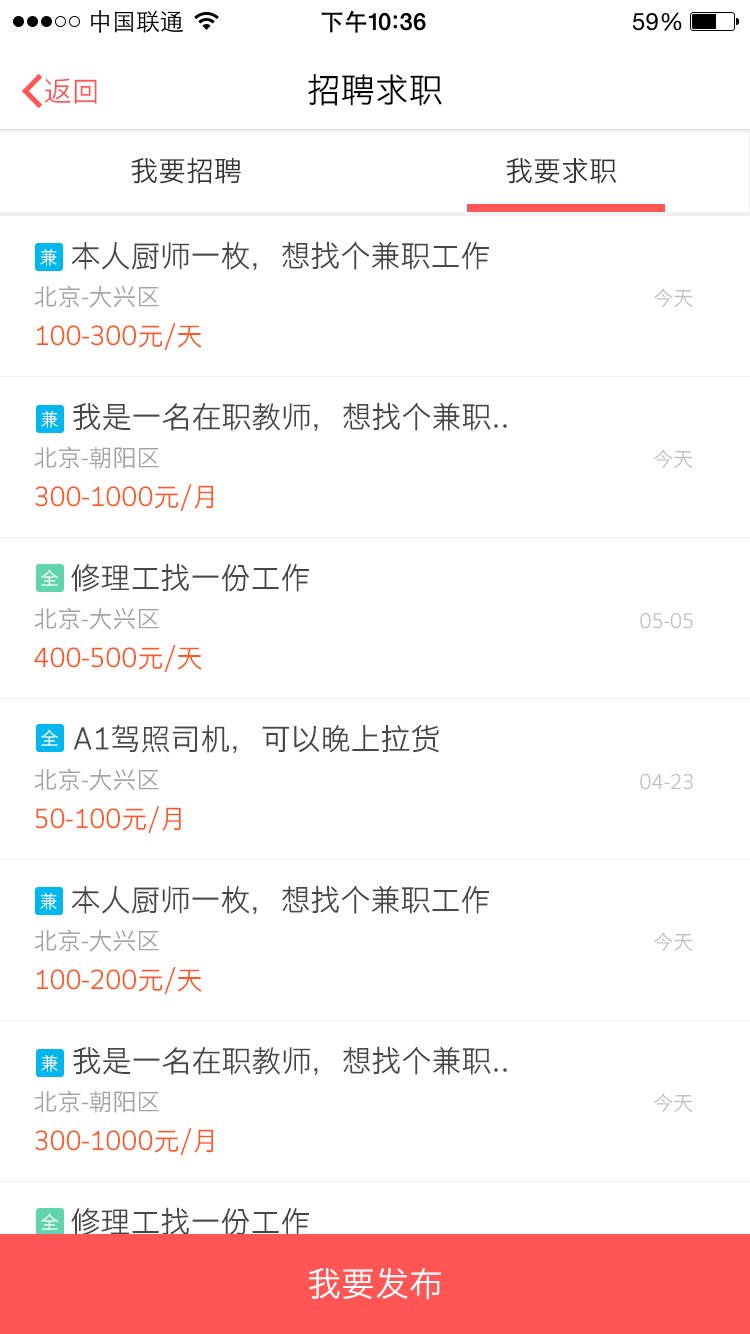
<style>
.page{position:relative;width:750px;height:1334px;background:#ffffff}
.page>*{position:absolute;margin:0}
.t1{font:28px "STHeitiSC-Light";color:#ff5555}
.t2{font:34px "STHeitiSC-Light";color:#000000}
.t3{font:28px "STHeitiSC-Light";color:#343434}
.t4{font:30px "STHeitiSC-Light";color:#484747}
.t5{font:18px "STHeitiSC-Light";color:#ffffff}
.t6{font:24px "STHeitiSC-Light";color:#a3a3a3}
.t7{font:20px "STHeitiSC-Light";color:#c1c0c0}
.t8{font:26px "STHeitiSC-Light";color:#ff5723}
.t9{font:34px "STHeitiSC-Light";color:#ffffff}
</style>
<div class="page">
<p class="t1" style="left:44px;top:78px;width:53px;height:26px">返回</p>
<p class="t2" style="left:308px;top:74px;width:134px;height:32px">招聘求职</p>
<p class="t3" style="left:131px;top:157px;width:110px;height:27px">我要招聘</p>
<p class="t3" style="left:506px;top:158px;width:111px;height:26px">我要求职</p>
<p class="t4" style="left:71px;top:241px;width:418px;height:29px">本人厨师一枚，想找个兼职工作</p>
<p class="t5" style="left:40px;top:249px;width:17px;height:17px">兼</p>
<p class="t6" style="left:34px;top:285px;width:125px;height:23px">北京-大兴区</p>
<p class="t7" style="left:654px;top:288px;width:39px;height:19px">今天</p>
<p class="t8" style="left:36px;top:323px;width:166px;height:28px">100-300元/天</p>
<p class="t5" style="left:41px;top:411px;width:17px;height:17px">兼</p>
<p class="t4" style="left:73px;top:402px;width:434px;height:29px">我是一名在职教师，想找个兼职..</p>
<p class="t6" style="left:34px;top:446px;width:125px;height:23px">北京-朝阳区</p>
<p class="t7" style="left:654px;top:449px;width:39px;height:19px">今天</p>
<p class="t8" style="left:35px;top:484px;width:178px;height:28px">300-1000元/月</p>
<p class="t5" style="left:41px;top:569px;width:17px;height:17px">全</p>
<p class="t4" style="left:71px;top:563px;width:238px;height:29px">修理工找一份工作</p>
<p class="t6" style="left:34px;top:607px;width:125px;height:23px">北京-大兴区</p>
<p class="t7" style="left:640px;top:613px;width:53px;height:16px">05-05</p>
<p class="t8" style="left:34px;top:645px;width:168px;height:28px">400-500元/天</p>
<p class="t4" style="left:73px;top:724px;width:366px;height:29px">A1驾照司机，可以晚上拉货</p>
<p class="t5" style="left:41px;top:729px;width:17px;height:17px">全</p>
<p class="t6" style="left:34px;top:768px;width:125px;height:23px">北京-大兴区</p>
<p class="t7" style="left:640px;top:774px;width:53px;height:16px">04-23</p>
<p class="t8" style="left:35px;top:806px;width:146px;height:28px">50-100元/月</p>
<p class="t5" style="left:40px;top:893px;width:17px;height:17px">兼</p>
<p class="t4" style="left:71px;top:885px;width:418px;height:29px">本人厨师一枚，想找个兼职工作</p>
<p class="t6" style="left:34px;top:929px;width:125px;height:23px">北京-大兴区</p>
<p class="t7" style="left:654px;top:932px;width:39px;height:19px">今天</p>
<p class="t8" style="left:36px;top:967px;width:166px;height:28px">100-200元/天</p>
<p class="t4" style="left:73px;top:1046px;width:434px;height:29px">我是一名在职教师，想找个兼职..</p>
<p class="t5" style="left:41px;top:1055px;width:17px;height:17px">兼</p>
<p class="t6" style="left:34px;top:1090px;width:125px;height:23px">北京-朝阳区</p>
<p class="t7" style="left:654px;top:1093px;width:39px;height:19px">今天</p>
<p class="t8" style="left:35px;top:1128px;width:178px;height:28px">300-1000元/月</p>
<p class="t5" style="left:41px;top:1213px;width:17px;height:17px">全</p>
<p class="t4" style="left:71px;top:1207px;width:238px;height:29px">修理工找一份工作</p>
<p class="t9" style="left:309px;top:1268px;width:132px;height:32px">我要发布</p>
</div>
